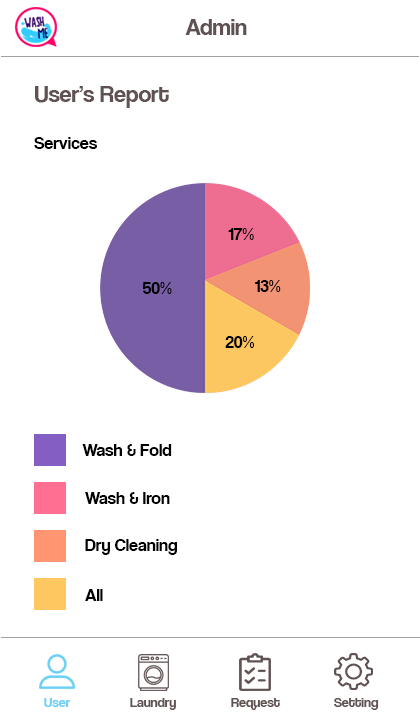
<style>
.page{position:relative;width:420px;height:720px;background:#ffffff}
.page>*{position:absolute;margin:0}
.t1{font:24px "CoolveticaRg-Regular";color:#605252}
.t2{font:18px "CoolveticaRg-Regular";color:#000000}
.t3{font:14px "CoolveticaRg-Regular";color:#6dcff6}
.t4{font:14px "CoolveticaRg-Regular";color:#605252}
</style>
<div class="page">
<p class="t1" style="left:185px;top:19px;width:62px;height:16px">Admin</p>
<p class="t1" style="left:35px;top:86px;width:134px;height:22px">User’s Report</p>
<p class="t2" style="left:34px;top:137px;width:63px;height:12px">Services</p>
<p class="t2" style="left:228px;top:228px;width:26px;height:12px">17%</p>
<p class="t2" style="left:255px;top:280px;width:26px;height:12px">13%</p>
<p class="t2" style="left:143px;top:282px;width:29px;height:12px">50%</p>
<p class="t2" style="left:225px;top:336px;width:29px;height:12px">20%</p>
<p class="t2" style="left:82px;top:444px;width:90px;height:12px">Wash &amp; Fold</p>
<p class="t2" style="left:85px;top:492px;width:85px;height:12px">Wash &amp; Iron</p>
<p class="t2" style="left:85px;top:539px;width:92px;height:16px">Dry Cleaning</p>
<p class="t2" style="left:85px;top:589px;width:18px;height:12px">All</p>
<p class="t3" style="left:44px;top:698px;width:27px;height:9px">User</p>
<p class="t4" style="left:130px;top:698px;width:46px;height:12px">Laundry</p>
<p class="t4" style="left:231px;top:698px;width:49px;height:12px">Request</p>
<p class="t4" style="left:334px;top:698px;width:45px;height:12px">Setting</p>
</div>
